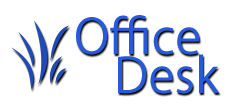
<style>
.page{position:relative;width:232px;height:112px;background:#ffffff}
.page>*{position:absolute;margin:0}
.t1{font:48px "KozGoPro-Regular";letter-spacing:0.005em;color:#275adb}
</style>
<div class="page">
<p class="t1" style="left:76px;top:15px;width:124px;height:40px">Office</p>
<p class="t1" style="left:118px;top:54px;width:102px;height:40px">Desk</p>
</div>
